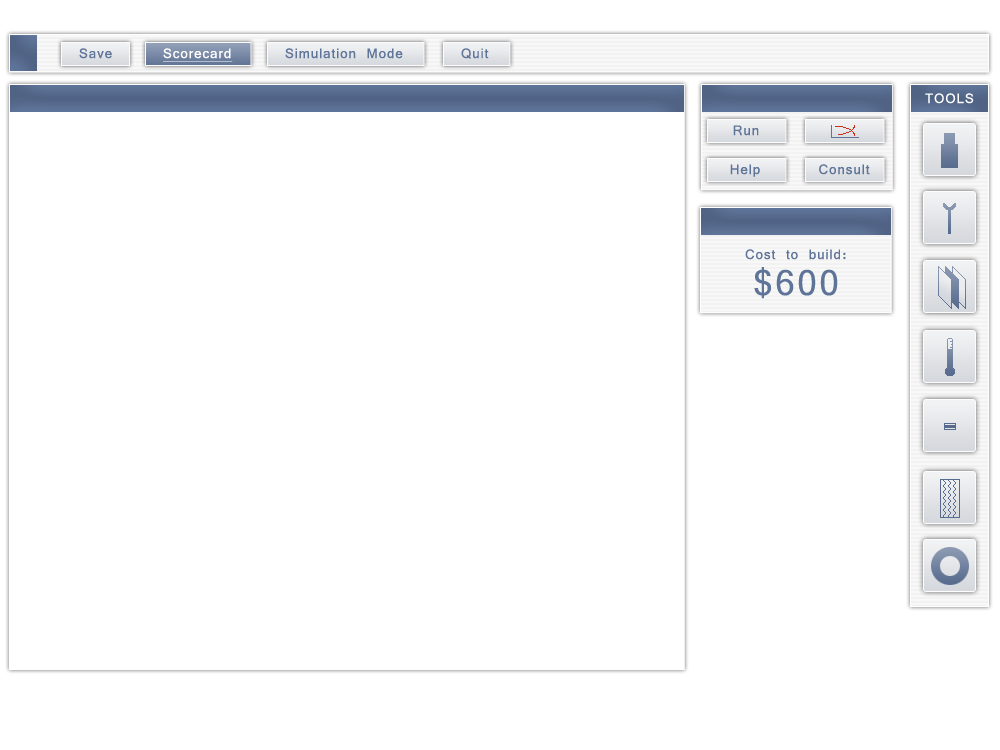
<style>
.page{position:relative;width:1000px;height:750px;background:#ffffff}
.page>*{position:absolute;margin:0}
.t1{font:20px "Vrinda";letter-spacing:0.05em;color:#5f7499}
.t2{font:20px "Vrinda";letter-spacing:0.05em;color:#5f7499;text-transform:uppercase}
.t3{font:20px "Vrinda";letter-spacing:0.05em;color:#ffffff;text-decoration:underline}
.t4{font:20px "Vrinda";letter-spacing:0.05em;color:#ffffff;text-transform:uppercase}
.t5{font:55px/36px "Kartika";letter-spacing:0.05em;color:#5f7499}
</style>
<div class="page">
<p class="t1" style="left:79px;top:48px;width:33px;height:11px"><span class="t2">S</span>ave</p>
<p class="t3" style="left:163px;top:48px;width:70px;height:14px">Scorecard</p>
<p class="t1" style="left:285px;top:48px;width:118px;height:11px">Simulation Mode</p>
<p class="t1" style="left:461px;top:48px;width:28px;height:11px">Quit</p>
<p class="t4" style="left:925px;top:93px;width:49px;height:11px">tools</p>
<p class="t1" style="left:733px;top:125px;width:26px;height:11px">Run</p>
<p class="t1" style="left:730px;top:164px;width:30px;height:13px">Help</p>
<p class="t1" style="left:819px;top:164px;width:51px;height:11px">Consult</p>
<p class="t1" style="left:745px;top:249px;width:101px;height:50px;text-align:center">Cost to build:<br><span class="t5">$600</span></p>
</div>
